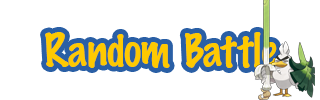
<style>
.page{position:relative;width:320px;height:100px;background:#ffffff}
.page>*{position:absolute;margin:0}
.t1{font:41.7px "MarkerFelt-Thin";letter-spacing:-0.05em;color:#fec901}
</style>
<div class="page">
<p class="t1" style="left:45px;top:32px;width:233px;height:36px">Random  Battle</p>
</div>
